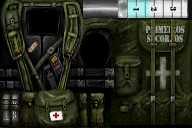
<style>
.page{position:relative;width:192px;height:128px}
.page>*{position:absolute;margin:0}
.t1{font:10.4px/9px "Army";color:#989a94;scale:0.7 1}
</style>
<div class="page">
<p class="t1" style="left:146px;top:25px;width:39px;height:18px;text-align:center">primeiros<br>socorros</p>
</div>
